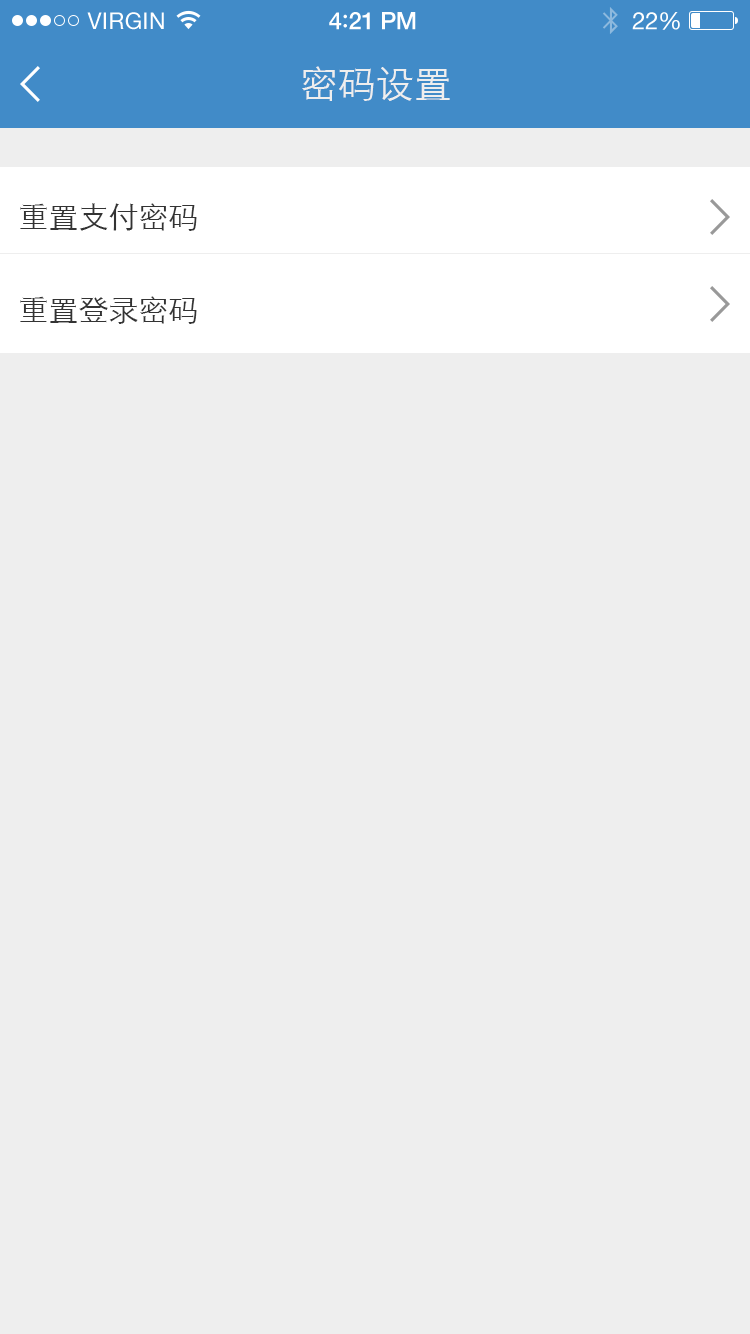
<style>
.page{position:relative;width:750px;height:1334px;background:#eeeeee}
.page>*{position:absolute;margin:0}
.t1{font:23px "HelveticaNeue";letter-spacing:0.02em;color:#ffffff}
.t2{font:24px "HelveticaNeue-Medium";letter-spacing:-0.02em;color:#ffffff}
.t3{font:26px "Avenir-Medium";letter-spacing:-0.02em;color:#ffffff}
.t4{font:24px "HelveticaNeue";letter-spacing:-0.02em;color:#ffffff}
.t5{font:38px "STXihei";color:#eeeeee}
.t6{font:30px "STXihei";color:#333333}
</style>
<div class="page">
<p class="t1" style="left:87px;top:12px;width:77px;height:18px">VIRGIN</p>
<p class="t2" style="left:329px;top:12px;width:87px;height:18px">4<span class="t3">:</span>21 PM</p>
<p class="t4" style="left:632px;top:12px;width:48px;height:18px">22%</p>
<p class="t5" style="left:302px;top:66px;width:148px;height:35px">密码设置</p>
<p class="t6" style="left:20px;top:203px;width:177px;height:28px">重置支付密码</p>
<p class="t6" style="left:20px;top:296px;width:177px;height:28px">重置登录密码</p>
</div>
